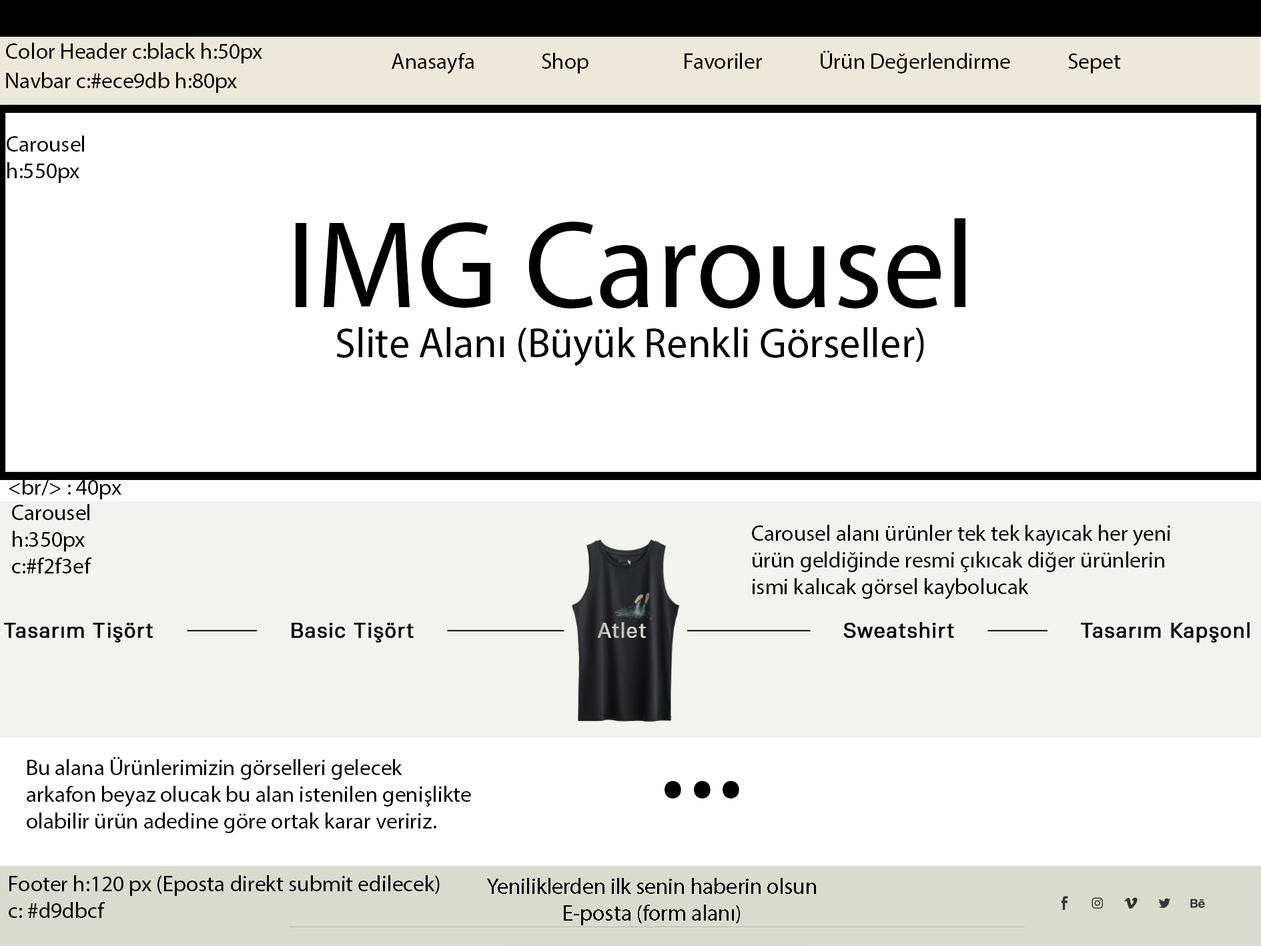
<style>
.page{position:relative;width:1261px;height:946px;background:#ffffff}
.page>*{position:absolute;margin:0}
.t1{font:22.2px "MyriadPro-Regular";color:#000000}
.t2{font:41.7px "MyriadPro-Regular";color:#000000}
.t3{font:125.1px "MyriadPro-Regular";color:#000000}
.t4{font:139px "MyriadPro-Regular";color:#000000}
</style>
<div class="page">
<p class="t1" style="left:6px;top:43px;width:256px;height:20px">Color Header c:black h:50px</p>
<p class="t1" style="left:392px;top:50px;width:729px;height:24px">Anasayfa              Shop                    Favoriler            Ürün Değerlendirme            Sepet</p>
<p class="t1" style="left:6px;top:72px;width:231px;height:21px">Navbar c:#ece9db h:80px</p>
<p class="t1" style="left:7px;top:135px;width:77px;height:48px">Carousel <br> h:550px</p>
<p class="t2" style="left:296px;top:218px;width:670px;height:148px;text-align:center"><span class="t3">IMG Carousel<br></span>Slite Alanı (Büyük Renkli Görseller)</p>
<p class="t1" style="left:9px;top:478px;width:112px;height:21px">&lt;br/&gt; : 40px</p>
<p class="t1" style="left:12px;top:504px;width:80px;height:69px">Carousel <br>h:350px <br>c:#f2f3ef</p>
<p class="t1" style="left:752px;top:524px;width:418px;height:75px">Carousel alanı ürünler tek tek kayıcak her yeni ürün geldiğinde resmi çıkıcak diğer ürünlerin ismi kalıcak görsel kaybolucak</p>
<p class="t1" style="left:27px;top:756px;width:444px;height:77px">Bu alana Ürünlerimizin görselleri gelecek <br>arkafon beyaz olucak bu alan istenilen genişlikte <br>olabilir ürün adedine göre ortak karar veririz.</p>
<p class="t4" style="left:665px;top:780px;width:74px;height:18px">...</p>
<p class="t1" style="left:9px;top:875px;width:431px;height:42px">Footer h:120 px (Eposta direkt submit edilecek)<br>c: #d9dbcf</p>
<p class="t1" style="left:487px;top:877px;width:329px;height:48px;text-align:center">Yeniliklerden ilk senin haberin olsun <br>E-posta (form alanı)</p>
</div>
